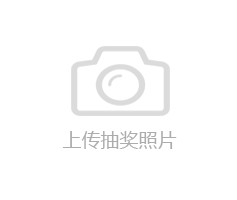
<style>
.page{position:relative;width:237px;height:200px;background:#ffffff}
.page>*{position:absolute;margin:0}
.t1{font:19px "MicrosoftYaHei";color:#acacac}
</style>
<div class="page">
<p class="t1" style="left:62px;top:131px;width:115px;height:18px">上传抽奖照片</p>
</div>
